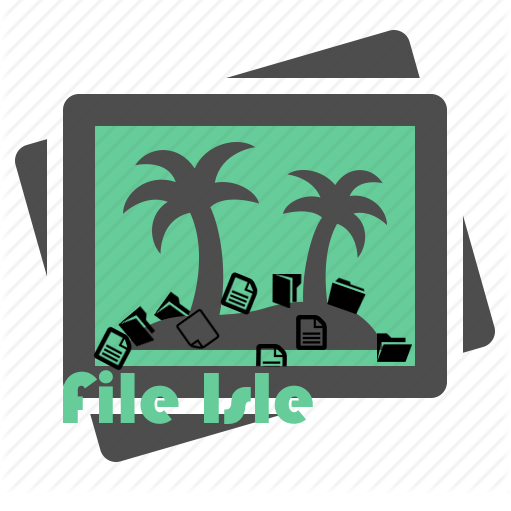
<style>
.page{position:relative;width:511px;height:511px;background:#ffffff}
.page>*{position:absolute;margin:0}
.t1{font:75px "Bauhaus93";color:#66cc99}
</style>
<div class="page">
<p class="t1" style="left:63px;top:370px;width:250px;height:54px">File Isle</p>
</div>
